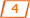
<style>
.page{position:relative;width:30px;height:18px;background:#fefefe}
.page>*{position:absolute;margin:0}
.t1{font:12.5px "Tahoma";color:#ff720a}
</style>
<div class="page">
<p class="t1" style="left:11px;top:4px;width:8px;height:9px">4</p>
</div>
